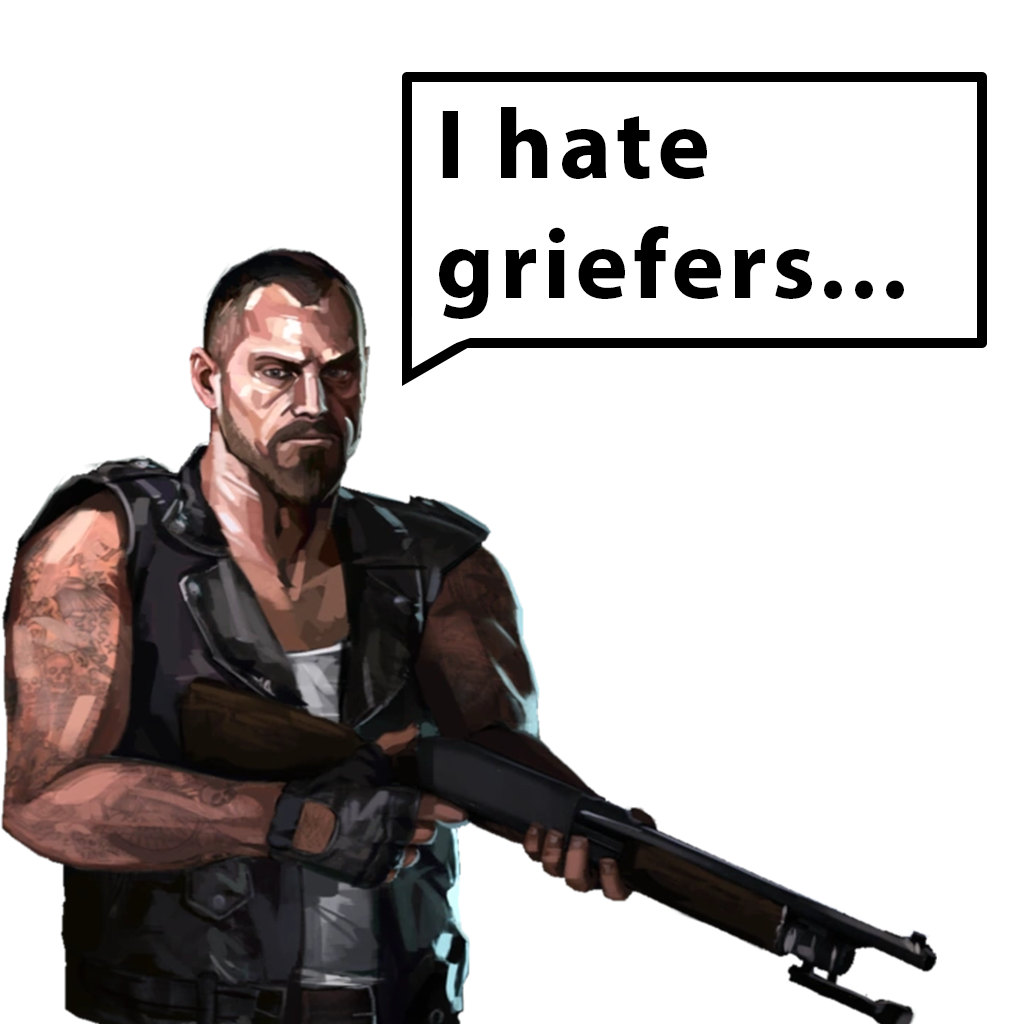
<style>
.page{position:relative;width:1024px;height:1024px;background:#ffffff}
.page>*{position:absolute;margin:0}
.t1{font:100px "MyriadPro-Bold";letter-spacing:0.05em;color:#000000}
</style>
<div class="page">
<p class="t1" style="left:439px;top:107px;width:465px;height:212px">I hate griefers...</p>
</div>
